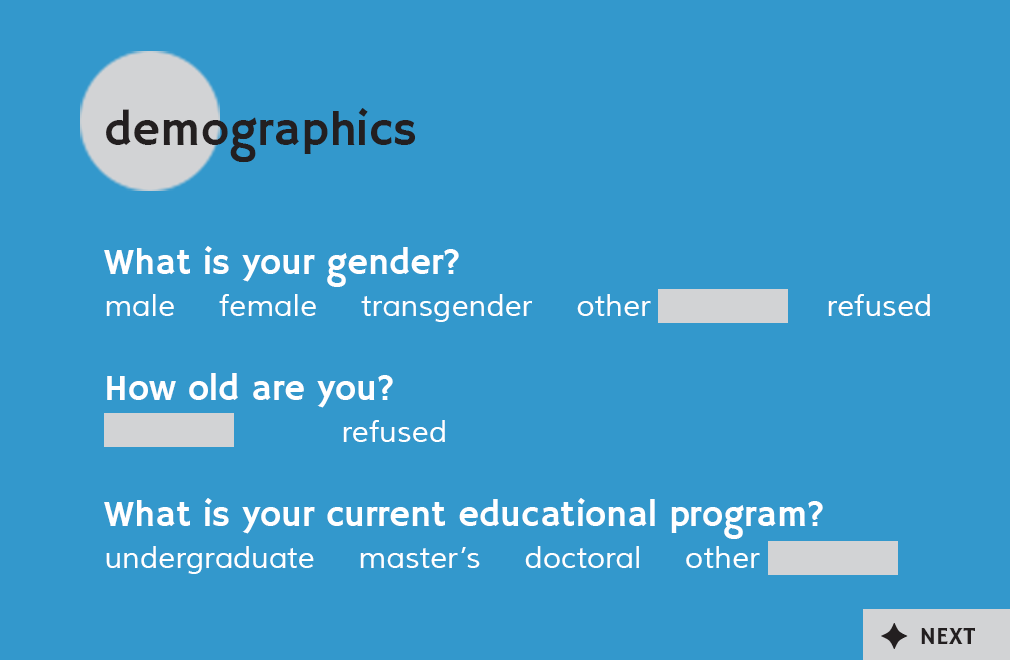
<style>
.page{position:relative;width:1010px;height:660px;background:#3398cc}
.page>*{position:absolute;margin:0}
.t1{font:48px "HammersmithOne-Regular";color:#231f20}
.t2{font:30px/42px "Muli";color:#ffffff}
.t3{font:36px/42px "HammersmithOne-Regular";color:#ffffff}
.t4{font:25px "HammersmithOne-Regular";color:#231f20}
</style>
<div class="page">
<p class="t1" style="left:106px;top:108px;width:310px;height:55px">demographics</p>
<p class="t2" style="left:104px;top:246px;width:826px;height:328px"><span class="t3">What is your gender? <br></span>male     female     transgender     other                    refused<br><br><span class="t3">How old are you? <br>                           </span>refused   <br><br><span class="t3">What is your current educational program? <br></span>undergraduate     master’s     doctoral     other</p>
<p class="t4" style="left:921px;top:627px;width:54px;height:17px">NEXT</p>
</div>
